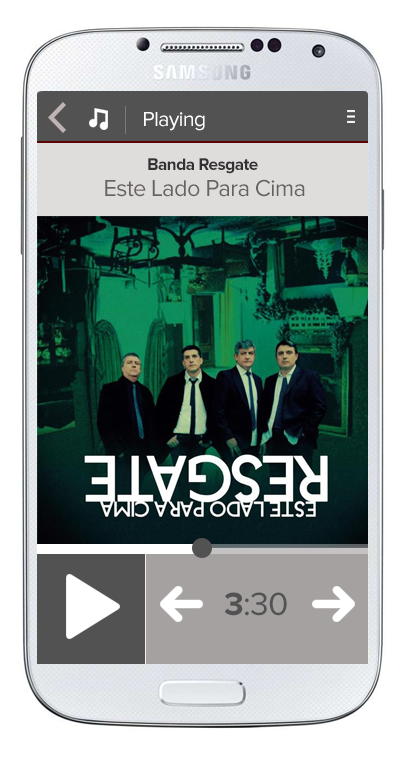
<style>
.page{position:relative;width:407px;height:770px;background:#ffffff}
.page>*{position:absolute;margin:0}
.t1{font:21.1px "ProximaNova-Regular";letter-spacing:-0.025em;color:#ffffff}
.t2{font:17.2px "ProximaNova-Bold";letter-spacing:-0.025em;color:#333232}
.t3{font:24px "ProximaNova-Regular";letter-spacing:-0.025em;color:#676161}
.t4{font:33.5px "ProximaNova-Regular";letter-spacing:-0.025em;color:#525252}
.t5{font:33.5px "ProximaNova-Bold";letter-spacing:-0.025em;color:#525252}
</style>
<div class="page">
<p class="t1" style="left:144px;top:112px;width:61px;height:19px">Playing</p>
<p class="t2" style="left:148px;top:158px;width:110px;height:16px">Banda Resgate</p>
<p class="t3" style="left:105px;top:179px;width:200px;height:18px">Este Lado Para Cima</p>
<p class="t4" style="left:224px;top:592px;width:63px;height:24px"><span class="t5">3</span>:30</p>
</div>
